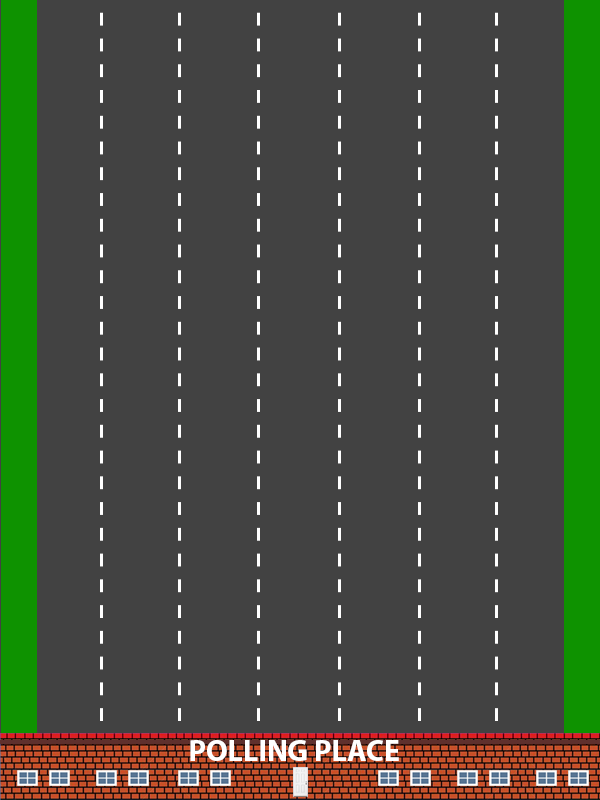
<style>
.page{position:relative;width:600px;height:800px;background:#424242}
.page>*{position:absolute;margin:0}
.t1{font:30px "MyriadPro-Bold";color:#ffffff}
</style>
<div class="page">
<p class="t1" style="left:190px;top:740px;width:209px;height:21px">POLLING PLACE</p>
</div>
